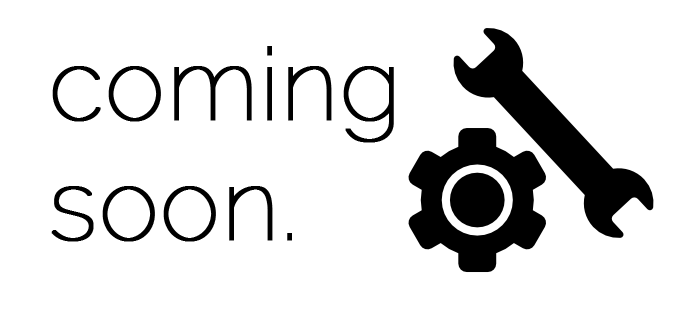
<style>
.page{position:relative;width:676px;height:329px;background:#ffffff}
.page>*{position:absolute;margin:0}
.t1{font:100px "Raleway-Thin";color:#000000;font-weight:bold}
</style>
<div class="page">
<p class="t1" style="left:51px;top:46px;width:343px;height:196px">coming<br>soon.</p>
</div>
